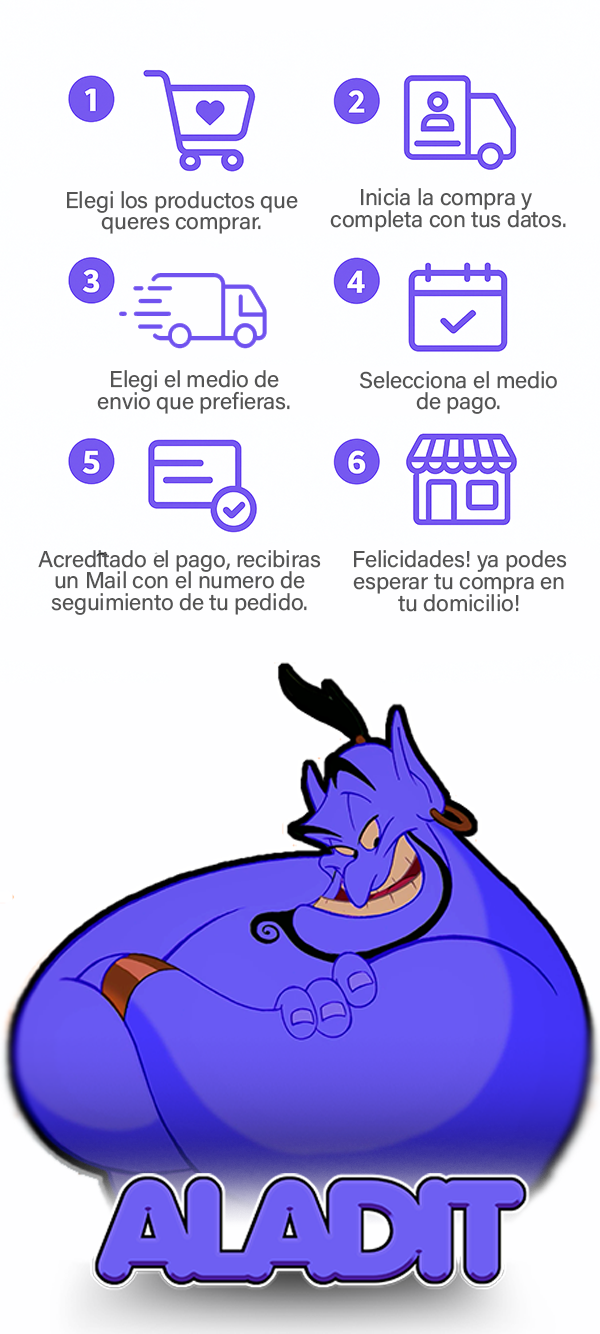
<style>
.page{position:relative;width:600px;height:1334px;background:#fefeff}
.page>*{position:absolute;margin:0}
.t1{font:22.9px/21.6px "AcuminConcept-Regular";letter-spacing:-0.01em;color:#545454}
</style>
<div class="page">
<p class="t1" style="left:67px;top:191px;width:231px;height:43px;text-align:center">Elegi los productos que<br>queres comprar.</p>
<p class="t1" style="left:330px;top:188px;width:236px;height:44px;text-align:center">Inicia la compra y <br>completa con tus datos.</p>
<p class="t1" style="left:97px;top:370px;width:193px;height:44px;text-align:center">Elegi el medio de<br>envio que prefieras.</p>
<p class="t1" style="left:359px;top:371px;width:198px;height:43px;text-align:center">Selecciona el medio<br>de pago.</p>
<p class="t1" style="left:38px;top:550px;width:283px;height:65px;text-align:center">Acreditado el pago, recibiras<br>un Mail con el numero de<br>seguimiento de tu pedido.</p>
<p class="t1" style="left:353px;top:550px;width:214px;height:62px;text-align:center">Felicidades! ya podes<br>esperar tu compra en<br>tu domicilio!</p>
</div>
